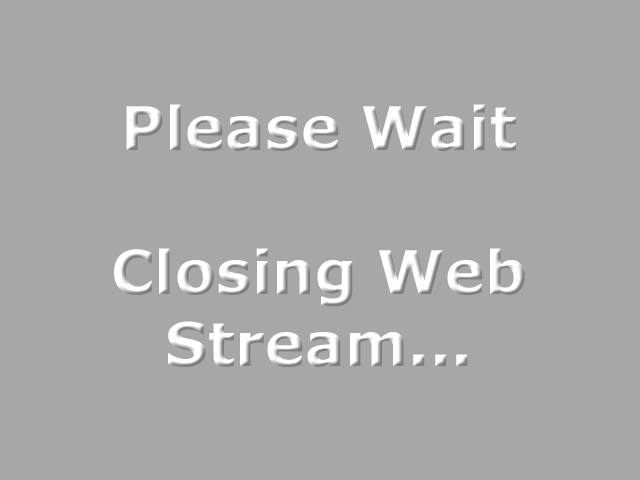
<style>
.page{position:relative;width:640px;height:480px;background:#a7a7a7}
.page>*{position:absolute;margin:0}
.t1{font:60px "Verdana-Bold";color:#ffffff}
</style>
<div class="page">
<p class="t1" style="left:114px;top:104px;width:411px;height:263px;text-align:center">Please Wait<br><br>Closing Web Stream...</p>
</div>
